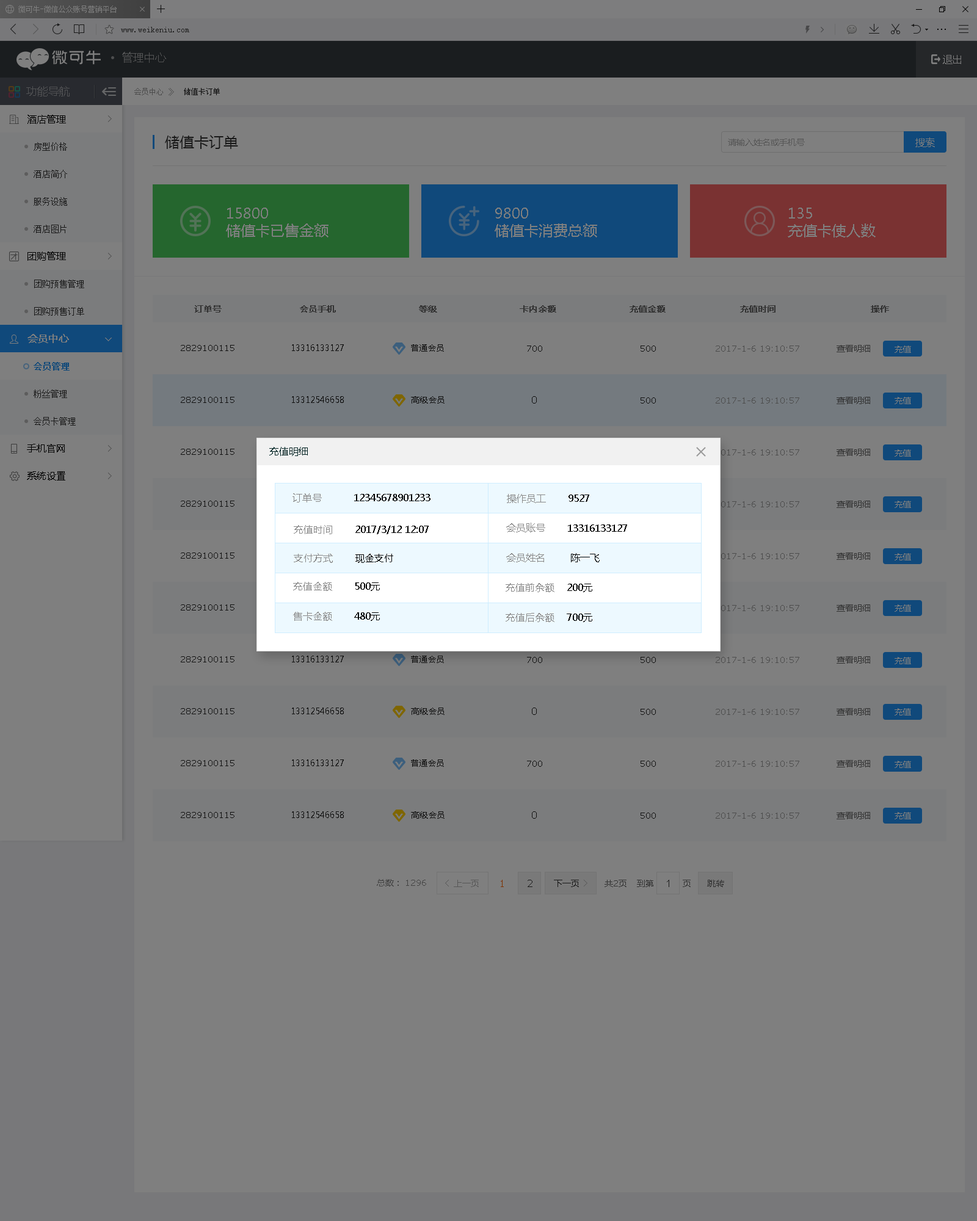
<style>
.page{position:relative;width:977px;height:1221px;background:#7f7f7f}
.page>*{position:absolute;margin:0}
.t1{font:7.3px "SimSun";color:#4c4c4c}
.t2{font:8.5px "SimSun";color:#4c4c4c}
.t3{font:7.3px "SimSun";color:#222222}
.t4{font:14.7px "MicrosoftYaHei";color:#191919}
.t5{font:14.7px/17.1px "MicrosoftYaHei";color:#7f7f7f}
.t6{font:8.5px "MicrosoftYaHei";color:#333333;font-weight:bold}
.t7{font:8.5px "Verdana";color:#222222}
.t8{font:8.5px "MicrosoftYaHei";color:#222222}
.t9{font:8.5px "Verdana";color:#4c4c4c}
.t10{font:8.5px "MicrosoftYaHei";color:#333333}
.t11{font:8.5px "MicrosoftYaHei";color:#7f7f7f}
.t12{font:9.8px "Verdana";color:#222222}
.t13{font:9.8px "MicrosoftYaHei";color:#002222}
.t14{font:9.8px "MicrosoftYaHei";color:#888888}
.t15{font:9.8px "MicrosoftYaHei";color:#000000}
</style>
<div class="page">
<p class="t1" style="left:134px;top:88px;width:29px;height:7px">会员中心</p>
<p class="t2" style="left:168px;top:88px;width:6px;height:8px">》</p>
<p class="t3" style="left:184px;top:88px;width:36px;height:7px">储值卡订单</p>
<p class="t4" style="left:165px;top:135px;width:73px;height:14px">储值卡订单</p>
<p class="t5" style="left:226px;top:208px;width:102px;height:29px">15800<br>储值卡已售金额</p>
<p class="t5" style="left:494px;top:208px;width:103px;height:29px">9800<br>储值卡消费总额</p>
<p class="t5" style="left:787px;top:208px;width:88px;height:29px">135<br>充值卡使人数</p>
<p class="t6" style="left:194px;top:305px;width:28px;height:8px">订单号</p>
<p class="t6" style="left:300px;top:305px;width:36px;height:8px">会员手机</p>
<p class="t6" style="left:419px;top:305px;width:18px;height:8px">等级</p>
<p class="t6" style="left:519px;top:305px;width:37px;height:8px">卡内余额</p>
<p class="t6" style="left:629px;top:305px;width:36px;height:8px">充值金额</p>
<p class="t6" style="left:740px;top:305px;width:35px;height:8px">充值时间</p>
<p class="t6" style="left:870px;top:305px;width:19px;height:8px">操作</p>
<p class="t7" style="left:181px;top:345px;width:53px;height:6px">2829100115</p>
<p class="t8" style="left:292px;top:344px;width:52px;height:7px">13316133127</p>
<p class="t8" style="left:411px;top:344px;width:33px;height:8px">普通会员</p>
<p class="t7" style="left:527px;top:346px;width:15px;height:6px">700</p>
<p class="t7" style="left:640px;top:346px;width:16px;height:6px">500</p>
<p class="t9" style="left:715px;top:346px;width:84px;height:6px">2017-1-6 19:10:57</p>
<p class="t10" style="left:836px;top:345px;width:34px;height:7px">查看明细</p>
<p class="t11" style="left:894px;top:346px;width:17px;height:7px">充值</p>
<p class="t7" style="left:181px;top:397px;width:53px;height:6px">2829100115</p>
<p class="t8" style="left:292px;top:396px;width:52px;height:7px">13312546658</p>
<p class="t8" style="left:411px;top:396px;width:33px;height:7px">高级会员</p>
<p class="t12" style="left:532px;top:396px;width:5px;height:7px">0</p>
<p class="t7" style="left:640px;top:397px;width:16px;height:6px">500</p>
<p class="t9" style="left:715px;top:397px;width:84px;height:6px">2017-1-6 19:10:57</p>
<p class="t10" style="left:836px;top:397px;width:34px;height:7px">查看明细</p>
<p class="t11" style="left:894px;top:397px;width:17px;height:7px">充值</p>
<p class="t13" style="left:269px;top:447px;width:39px;height:9px">充值明细</p>
<p class="t14" style="left:292px;top:493px;width:30px;height:9px">订单号</p>
<p class="t15" style="left:354px;top:494px;width:76px;height:7px">12345678901233</p>
<p class="t14" style="left:507px;top:494px;width:39px;height:9px">操作员工</p>
<p class="t15" style="left:568px;top:494px;width:21px;height:8px">9527</p>
<p class="t14" style="left:294px;top:525px;width:38px;height:9px">充值时间</p>
<p class="t15" style="left:355px;top:526px;width:74px;height:8px">2017/3/12 12:07</p>
<p class="t14" style="left:506px;top:523px;width:39px;height:9px">会员账号</p>
<p class="t15" style="left:568px;top:524px;width:59px;height:8px">13316133127</p>
<p class="t14" style="left:294px;top:553px;width:39px;height:10px">支付方式</p>
<p class="t15" style="left:355px;top:554px;width:38px;height:9px">现金支付</p>
<p class="t14" style="left:506px;top:553px;width:38px;height:9px">会员姓名</p>
<p class="t15" style="left:571px;top:553px;width:28px;height:9px">陈一飞</p>
<p class="t14" style="left:293px;top:582px;width:39px;height:9px">充值金额</p>
<p class="t15" style="left:355px;top:582px;width:25px;height:9px">500元</p>
<p class="t14" style="left:505px;top:583px;width:49px;height:9px">充值前余额</p>
<p class="t15" style="left:567px;top:584px;width:25px;height:8px">200元</p>
<p class="t14" style="left:293px;top:612px;width:39px;height:9px">售卡金额</p>
<p class="t15" style="left:354px;top:612px;width:26px;height:9px">480元</p>
<p class="t14" style="left:505px;top:613px;width:49px;height:9px">充值后余额</p>
<p class="t15" style="left:566px;top:613px;width:26px;height:9px">700元</p>
</div>
